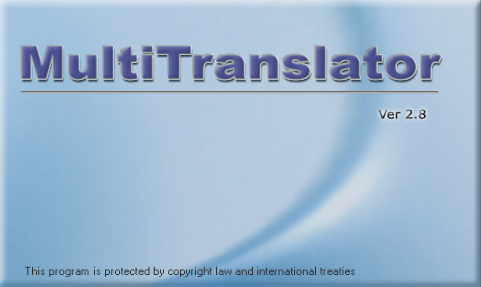
<style>
.page{position:relative;width:481px;height:287px}
.page>*{position:absolute;margin:0}
.t1{font:46px "Arial-Black";color:#505592;scale:1.1 1}
.t2{font:12px "Verdana";scale:1.1 1}
.t3{font:10px "PROMT Helv Cyr";color:#303030;scale:1.1 1}
</style>
<div class="page">
<p class="t1" style="left:21px;top:46px;width:421px;height:34px">MultiTranslator</p>
<p class="t2" style="left:378px;top:109px;width:48px;height:10px">Ver 2.8</p>
<p class="t3" style="left:25px;top:266px;width:330px;height:11px">This program is protected by copyright law and international treaties</p>
</div>
